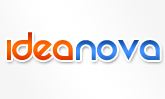
<style>
.page{position:relative;width:165px;height:99px}
.page>*{position:absolute;margin:0}
.t1{font:44px "REZ";color:#f55b00}
.t2{font:44px "REZ"}
</style>
<div class="page">
<p class="t1" style="left:7px;top:32px;width:66px;height:29px">IDea</p>
<p class="t2" style="left:76px;top:40px;width:84px;height:21px">Nova</p>
</div>
